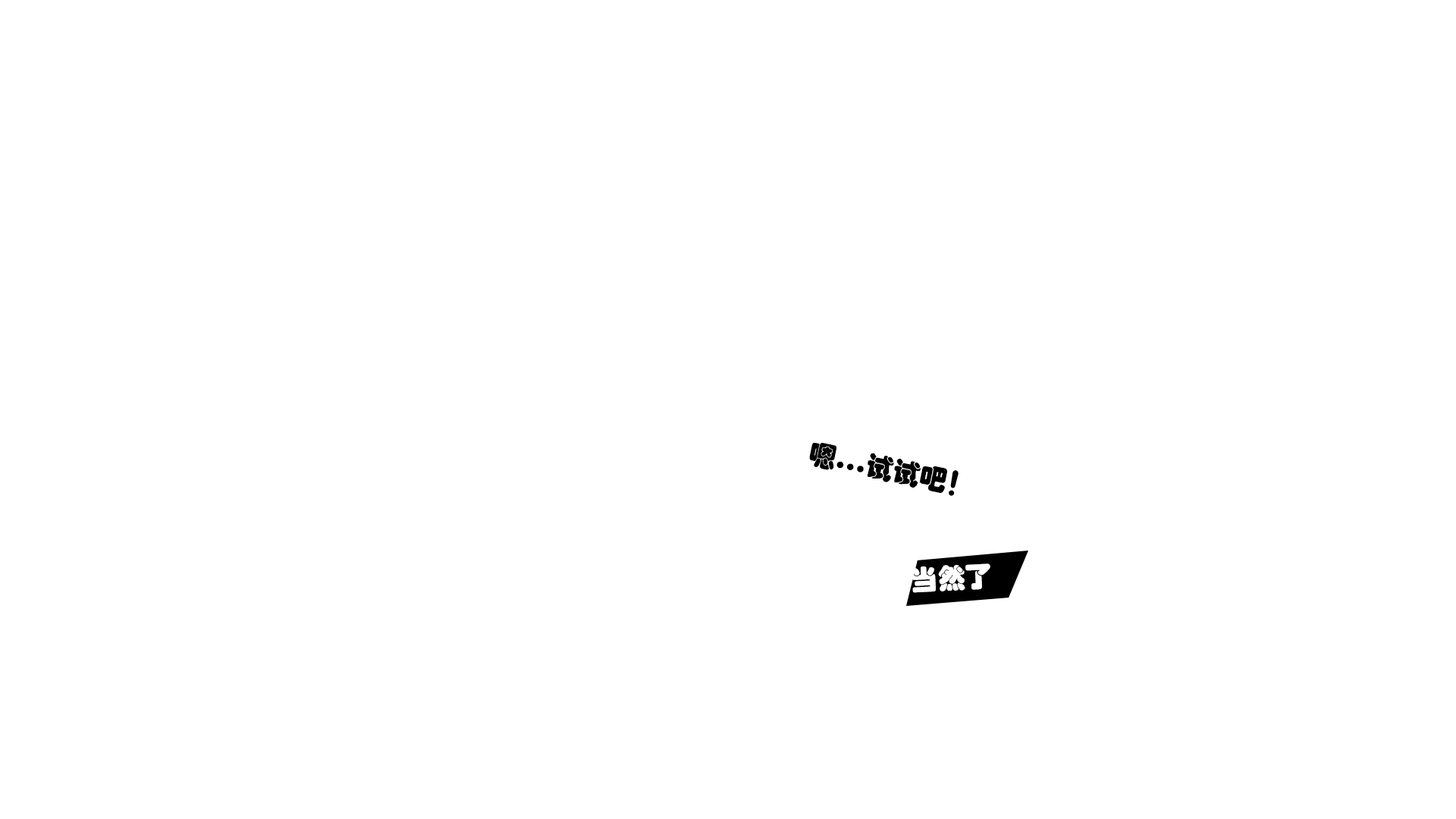
<style>
.page{position:relative;width:1456px;height:819px;background:#ffffff}
.page>*{position:absolute;margin:0}
.t1{font:27.3px "STHupo";color:#000000}
.t2{font:27.3px "STHupo";color:#ffffff}
</style>
<div class="page">
<p class="t1" style="left:809px;top:443px;width:150px;height:53px;rotate:12deg">嗯...试试吧！</p>
<p class="t2" style="left:912px;top:563px;width:78px;height:30px;rotate:-3deg">当然了</p>
</div>
